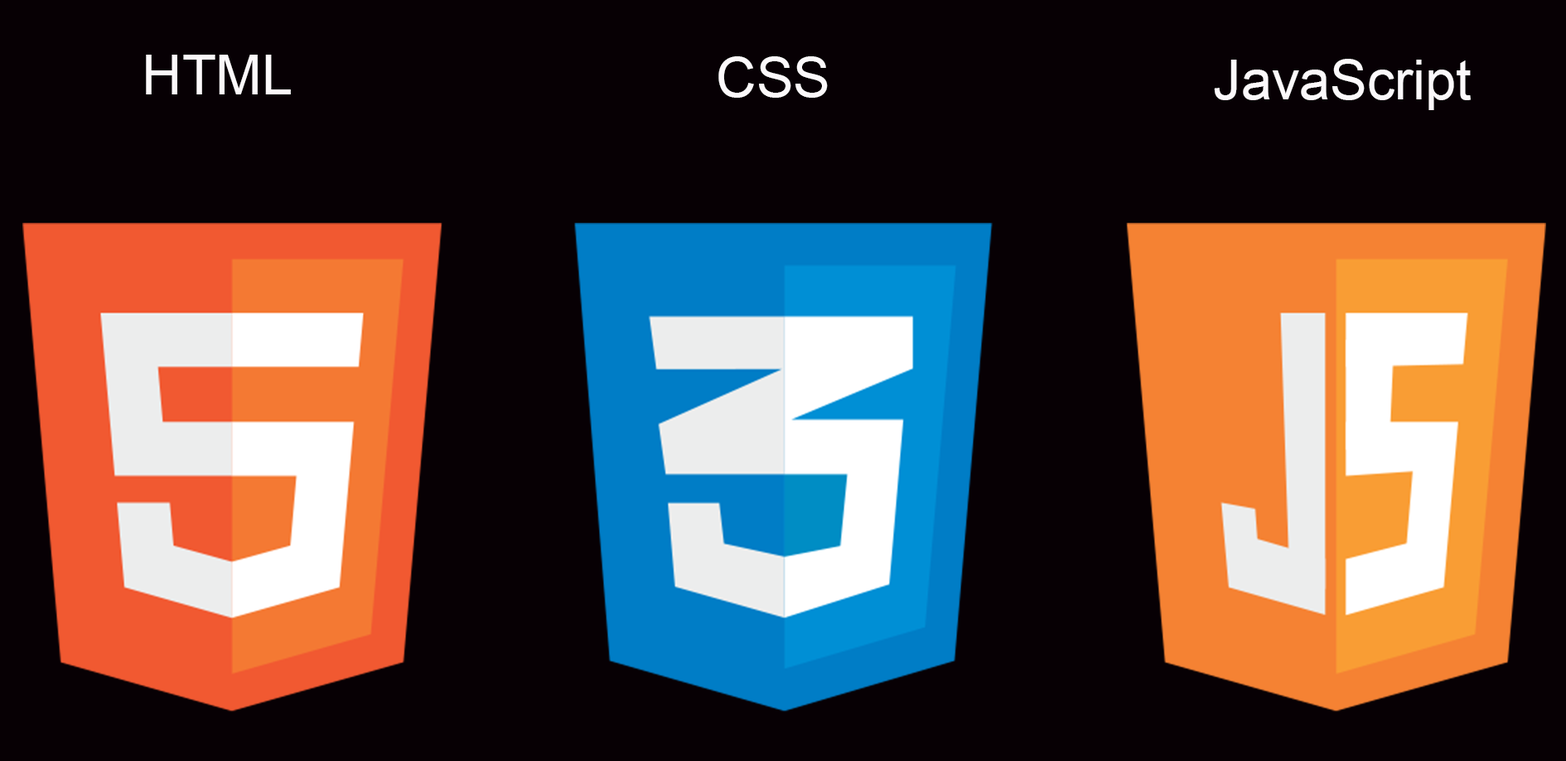
<style>
.page{position:relative;width:1566px;height:761px;background:#070004}
.page>*{position:absolute;margin:0}
.t1{font:55.2px "ArialMT";color:#fcf9fb}
</style>
<div class="page">
<p class="t1" style="left:146px;top:55px;width:145px;height:39px">HTML</p>
<p class="t1" style="left:718px;top:56px;width:110px;height:42px">CSS</p>
<p class="t1" style="left:1214px;top:59px;width:257px;height:51px">JavaScript</p>
</div>
